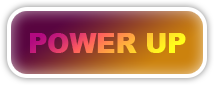
<style>
.page{position:relative;width:214px;height:85px}
.page>*{position:absolute;margin:0}
.t1{font:26.7px "Arial-Black"}
</style>
<div class="page">
<p class="t1" style="left:30px;top:33px;width:156px;height:20px">POWER UP</p>
</div>
